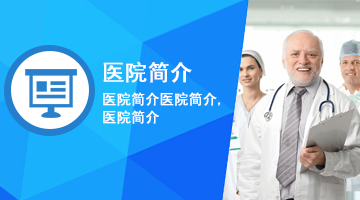
<style>
.page{position:relative;width:360px;height:200px}
.page>*{position:absolute;margin:0}
.t1{font:22px "SimHei";color:#ffffff;font-weight:bold}
.t2{font:14px/18px "SimHei";color:#ffffff;font-weight:bold}
</style>
<div class="page">
<p class="t1" style="left:103px;top:61px;width:89px;height:22px">医院简介</p>
<p class="t2" style="left:103px;top:92px;width:117px;height:32px">医院简介医院简介,<br>医院简介</p>
</div>
